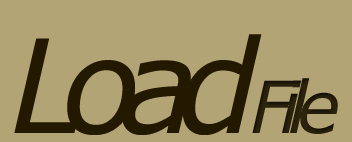
<style>
.page{position:relative;width:352px;height:142px;background:#b3a476}
.page>*{position:absolute;margin:0}
.t1{font:130px "Verdana-Italic";letter-spacing:-0.159em;color:#231900}
.t2{font:72px "Verdana-Italic";letter-spacing:-0.159em;color:#2e250d}
</style>
<div class="page">
<p class="t1" style="left:14px;top:34px;width:248px;height:101px">Load</p>
<p class="t2" style="left:252px;top:78px;width:86px;height:56px">File</p>
</div>
